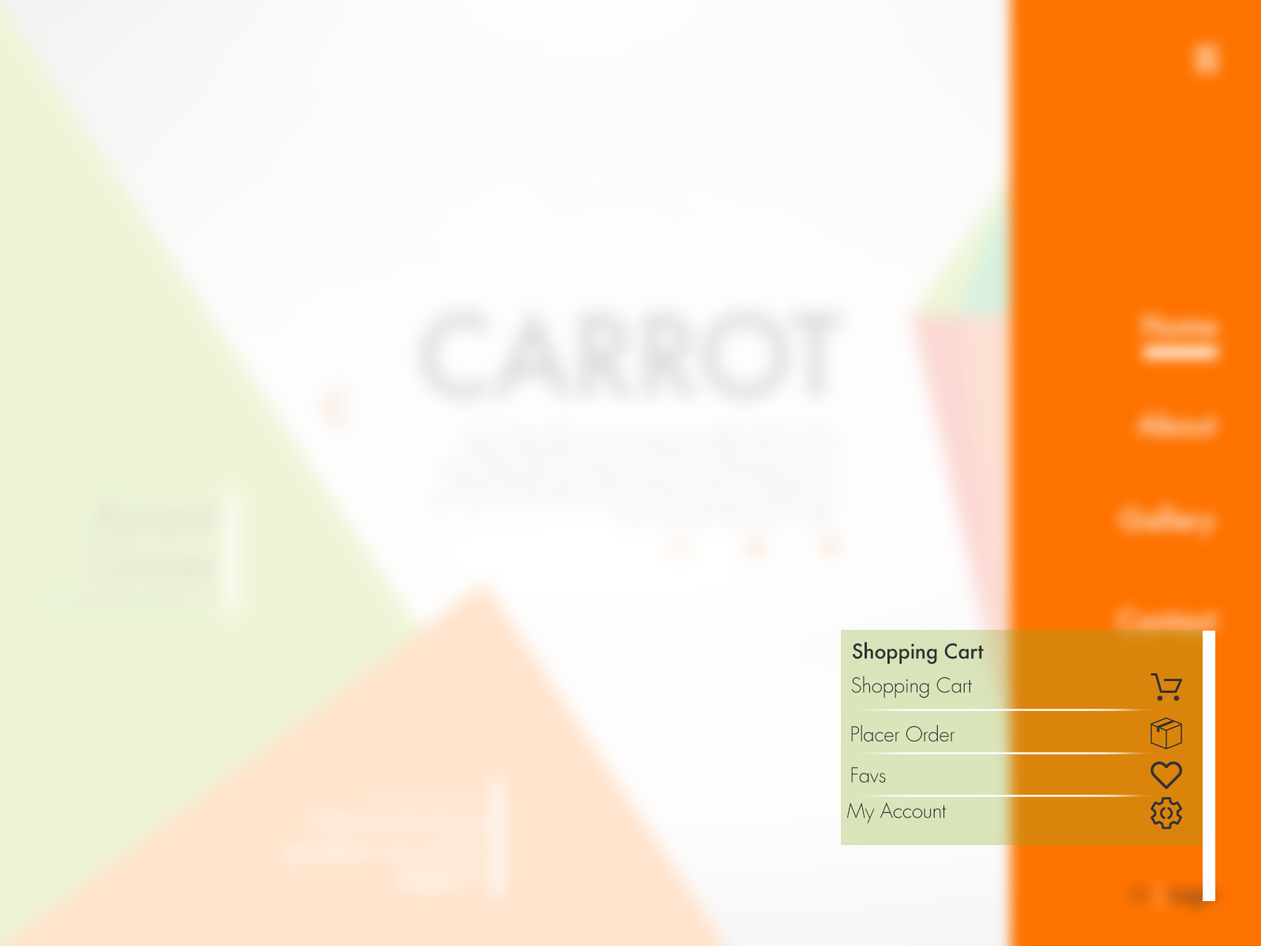
<style>
.page{position:relative;width:1261px;height:946px}
.page>*{position:absolute;margin:0}
.t1{font:20.1px "Futura-Medium";letter-spacing:-0.012em;color:#333333}
.t2{font:20.1px "FuturaLight";letter-spacing:-0.012em;color:#333333}
</style>
<div class="page">
<p class="t1" style="left:852px;top:641px;width:132px;height:23px">Shopping Cart</p>
<p class="t2" style="left:851px;top:675px;width:121px;height:23px">Shopping Cart</p>
<p class="t2" style="left:851px;top:724px;width:104px;height:18px">Placer Order</p>
<p class="t2" style="left:851px;top:767px;width:35px;height:16px">Favs</p>
<p class="t2" style="left:846px;top:801px;width:100px;height:23px">My Account</p>
</div>
